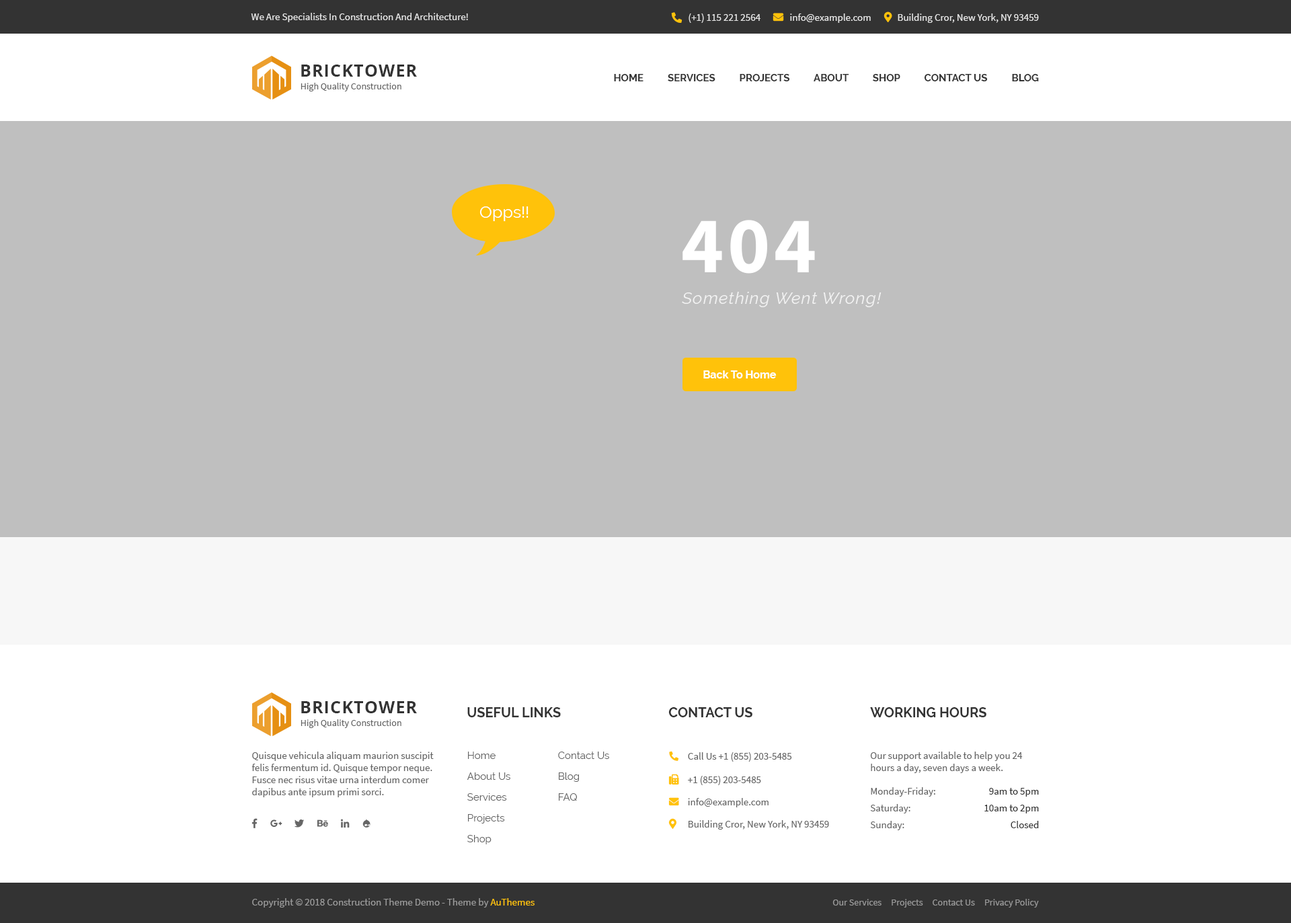
<style>
.page{position:relative;width:1291px;height:923px;background:#bfbfbf}
.page>*{position:absolute;margin:0}
.t1{font:10.1px "SourceSansPro-Regular";color:#e6e6e6}
.t2{font:16.8px "OpenSans-Bold";letter-spacing:0.05em;color:#333333;text-transform:uppercase}
.t3{font:10.1px "Raleway-Bold";color:#333333;text-transform:uppercase}
.t4{font:9.4px "SourceSansPro-Regular";color:#666666}
.t5{font:16.8px "Raleway-Regular";color:#ffffff}
.t6{font:80.7px "SourceSansPro-Bold";letter-spacing:0.05em;color:#ffffff}
.t7{font:16.8px "Raleway-Italic";letter-spacing:0.05em;color:#f2f2f2}
.t8{font:10.8px "Raleway-Bold";color:#ffffff}
.t9{font:13.5px "Raleway-Bold";color:#333333;text-transform:uppercase}
.t10{font:10.1px/12.1px "SourceSansPro-Regular";color:#666666}
.t11{font:10.1px "Raleway-Regular";color:#666666}
.t12{font:10.1px "SourceSansPro-Regular";color:#666666}
.t13{font:10.1px "SourceSansPro-Regular";color:#333333}
.t14{font:10.1px "SourceSansPro-Regular";color:#999999}
.t15{font:10.1px "SourceSansPro-Regular";color:#ffc20a}
.t16{font:9.4px "SourceSansPro-Regular";color:#999999}
</style>
<div class="page">
<p class="t1" style="left:251px;top:13px;width:217px;height:9px">We Are Specialists In Construction And Architecture!</p>
<p class="t1" style="left:689px;top:13px;width:72px;height:10px">(+1) 115 221 2564</p>
<p class="t1" style="left:790px;top:13px;width:81px;height:10px">info@example.com</p>
<p class="t1" style="left:898px;top:13px;width:141px;height:10px">Building Cror, New York, NY 93459</p>
<p class="t2" style="left:301px;top:65px;width:116px;height:12px">BrickTower</p>
<p class="t3" style="left:614px;top:74px;width:425px;height:7px">Home          Services          Projects          About          Shop          Contact Us          Blog</p>
<p class="t4" style="left:301px;top:83px;width:101px;height:8px">High Quality Construction</p>
<p class="t5" style="left:480px;top:206px;width:49px;height:15px">Opps!!</p>
<p class="t6" style="left:683px;top:220px;width:132px;height:54px">404</p>
<p class="t7" style="left:682px;top:292px;width:200px;height:15px">Something Went Wrong!</p>
<p class="t8" style="left:703px;top:371px;width:74px;height:8px">Back To Home</p>
<p class="t2" style="left:301px;top:701px;width:116px;height:13px">BrickTower</p>
<p class="t9" style="left:467px;top:708px;width:94px;height:10px">Useful Links</p>
<p class="t9" style="left:669px;top:708px;width:84px;height:10px">Contact Us</p>
<p class="t9" style="left:870px;top:708px;width:117px;height:10px">Working Hours</p>
<p class="t4" style="left:301px;top:720px;width:101px;height:8px">High Quality Construction</p>
<p class="t10" style="left:252px;top:752px;width:182px;height:46px">Quisque vehicula aliquam maurion suscipit felis fermentum id. Quisque tempor neque. Fusce nec risus vitae urna interdum comer dapibus ante ipsum primi sorci.</p>
<p class="t11" style="left:468px;top:752px;width:28px;height:7px">Home</p>
<p class="t11" style="left:558px;top:752px;width:51px;height:7px">Contact Us</p>
<p class="t12" style="left:688px;top:753px;width:104px;height:9px">Call Us +1 (855) 203-5485</p>
<p class="t10" style="left:870px;top:752px;width:153px;height:21px">Our support available to help you 24 hours a day, seven days a week.</p>
<p class="t11" style="left:467px;top:773px;width:43px;height:7px">About Us</p>
<p class="t11" style="left:559px;top:773px;width:20px;height:9px">Blog</p>
<p class="t12" style="left:688px;top:776px;width:73px;height:10px">+1 (855) 203-5485</p>
<p class="t11" style="left:467px;top:794px;width:40px;height:7px">Services</p>
<p class="t11" style="left:559px;top:794px;width:18px;height:7px">FAQ</p>
<p class="t12" style="left:871px;top:788px;width:65px;height:9px">Monday-Friday:</p>
<p class="t13" style="left:989px;top:788px;width:50px;height:9px">9am to 5pm</p>
<p class="t12" style="left:688px;top:798px;width:81px;height:10px">info@example.com</p>
<p class="t12" style="left:870px;top:804px;width:41px;height:10px">Saturday:</p>
<p class="t13" style="left:985px;top:805px;width:54px;height:9px">10am to 2pm</p>
<p class="t11" style="left:468px;top:814px;width:37px;height:10px">Projects</p>
<p class="t12" style="left:689px;top:821px;width:140px;height:9px">Building Cror, New York, NY 93459</p>
<p class="t12" style="left:870px;top:821px;width:35px;height:10px">Sunday:</p>
<p class="t13" style="left:1011px;top:821px;width:28px;height:8px">Closed</p>
<p class="t11" style="left:467px;top:835px;width:25px;height:10px">Shop</p>
<p class="t14" style="left:252px;top:899px;width:283px;height:9px">Copyright © 2018 Construction Theme Demo - Theme by <span class="t15">AuThemes</span></p>
<p class="t16" style="left:833px;top:899px;width:206px;height:9px">Our Services     Projects     Contact Us     Privacy Policy</p>
</div>
